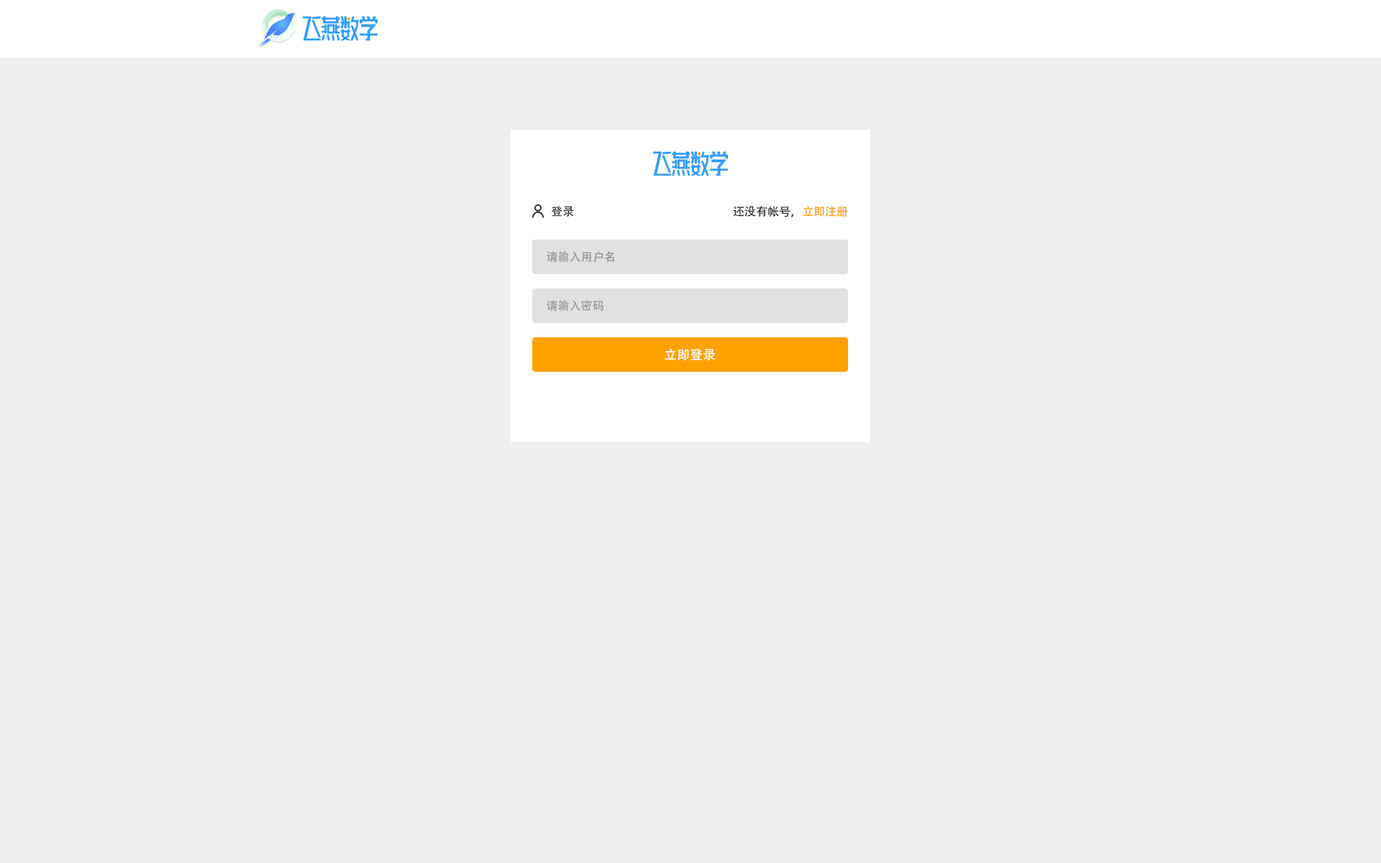
<style>
.page{position:relative;width:1381px;height:863px;background:#eeeeee}
.page>*{position:absolute;margin:0}
.t1{font:11.5px "AdobeHeitiStd-Regular";color:#333333}
.t2{font:11.5px "AdobeHeitiStd-Regular";color:#ffa200}
.t3{font:11.5px "AdobeHeitiStd-Regular";color:#999999}
.t4{font:12.9px "AdobeHeitiStd-Regular";color:#ffffff}
</style>
<div class="page">
<p class="t1" style="left:551px;top:206px;width:23px;height:11px">登录</p>
<p class="t1" style="left:733px;top:206px;width:115px;height:11px">还没有帐号，<span class="t2">立即注册</span></p>
<p class="t3" style="left:547px;top:251px;width:67px;height:12px">请输入用户名</p>
<p class="t3" style="left:547px;top:300px;width:57px;height:12px">请输入密码</p>
<p class="t4" style="left:665px;top:348px;width:50px;height:13px">立即登录</p>
</div>
